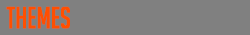
<style>
.page{position:relative;width:250px;height:35px;background:#808080}
.page>*{position:absolute;margin:0}
.t1{font:30px "BigNoodleTitling";color:#ff4f00}
</style>
<div class="page">
<p class="t1" style="left:6px;top:6px;width:64px;height:23px">THEMES</p>
</div>
